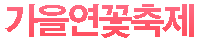
<style>
.page{position:relative;width:200px;height:40px;background:#ffffff}
.page>*{position:absolute;margin:0}
.t1{font:35px "H2gtrE";letter-spacing:-0.1em;color:#ff5d72}
</style>
<div class="page">
<p class="t1" style="left:5px;top:4px;width:189px;height:34px">가을연꽃축제</p>
</div>
